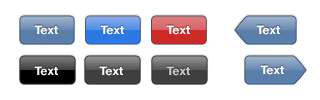
<style>
.page{position:relative;width:320px;height:100px;background:#ffffff}
.page>*{position:absolute;margin:0}
.t1{font:12px "HelveticaNeue-Bold";color:#ffffff}
.t2{font:12px "HelveticaNeue-Bold";color:#cccccc}
</style>
<div class="page">
<p class="t1" style="left:34px;top:25px;width:24px;height:10px">Text</p>
<p class="t1" style="left:100px;top:25px;width:24px;height:10px">Text</p>
<p class="t1" style="left:166px;top:25px;width:24px;height:10px">Text</p>
<p class="t1" style="left:256px;top:25px;width:24px;height:10px">Text</p>
<p class="t1" style="left:260px;top:65px;width:24px;height:10px">Text</p>
<p class="t1" style="left:34px;top:66px;width:24px;height:10px">Text</p>
<p class="t1" style="left:99px;top:66px;width:24px;height:10px">Text</p>
<p class="t2" style="left:166px;top:66px;width:24px;height:10px">Text</p>
</div>
